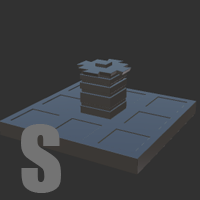
<style>
.page{position:relative;width:200px;height:200px;background:#313131}
.page>*{position:absolute;margin:0}
.t1{font:85.1px "Impact";color:#737373}
</style>
<div class="page">
<p class="t1" style="left:21px;top:124px;width:40px;height:69px">S</p>
</div>
